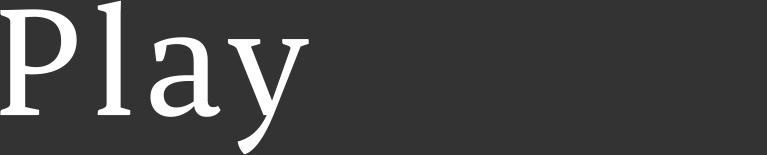
<style>
.page{position:relative;width:767px;height:155px;background:#333333}
.page>*{position:absolute;margin:0}
.t1{font:149.8px "false";letter-spacing:0.04em;color:#ffffff}
</style>
<div class="page">
<p class="t1" style="left:0px;top:0px;width:309px;height:155px">Play</p>
</div>
